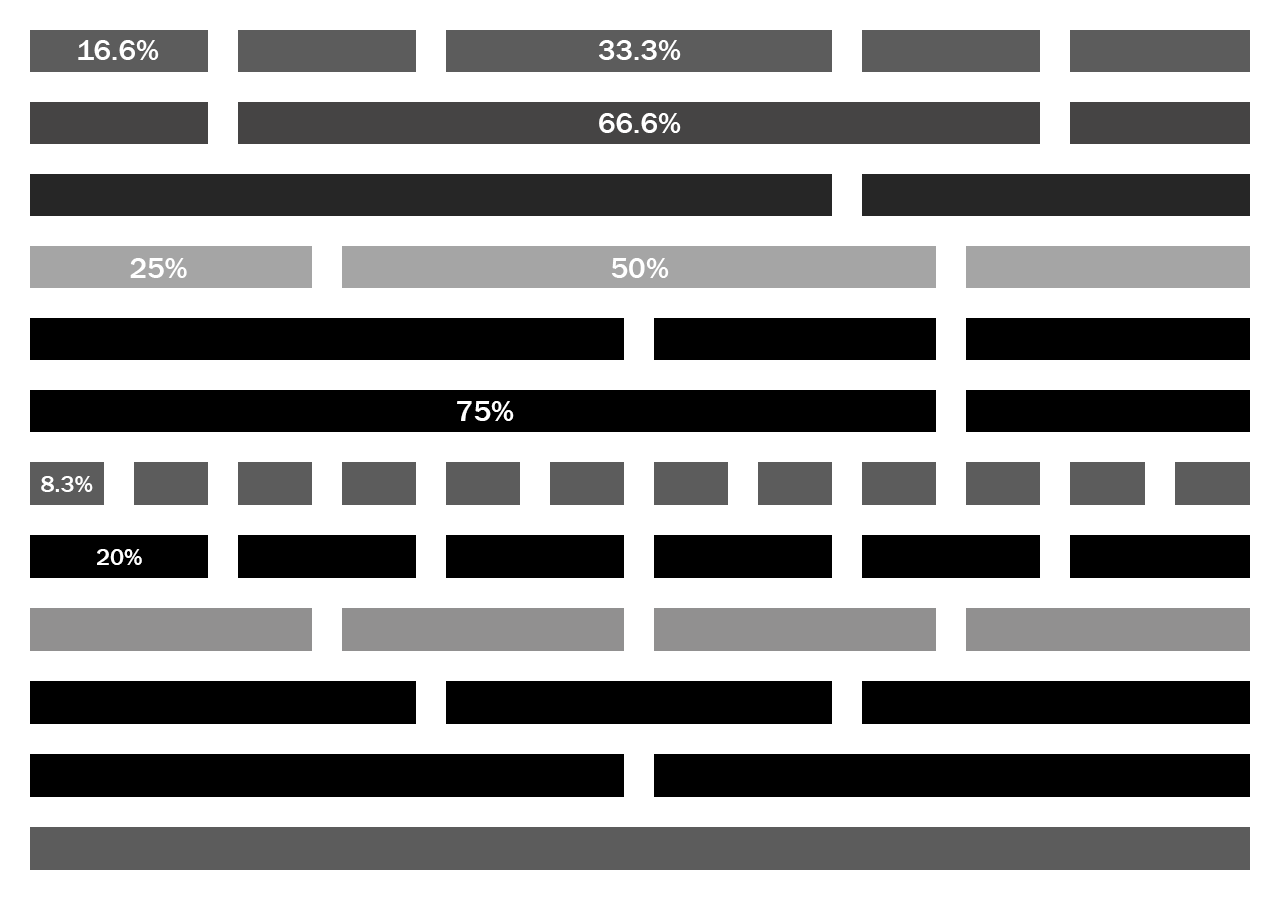
<style>
.page{position:relative;width:1280px;height:900px;background:#ffffff}
.page>*{position:absolute;margin:0}
.t1{font:30px "FranklinGothic-Medium";color:#ffffff}
.t2{font:24px "FranklinGothic-Medium";color:#ffffff}
</style>
<div class="page">
<p class="t1" style="left:78px;top:40px;width:81px;height:20px">16.6%</p>
<p class="t1" style="left:599px;top:40px;width:82px;height:20px">33.3%</p>
<p class="t1" style="left:599px;top:113px;width:82px;height:20px">66.6%</p>
<p class="t1" style="left:130px;top:258px;width:57px;height:20px">25%</p>
<p class="t1" style="left:611px;top:258px;width:58px;height:20px">50%</p>
<p class="t1" style="left:457px;top:401px;width:57px;height:20px">75%</p>
<p class="t2" style="left:41px;top:476px;width:52px;height:16px">8.3%</p>
<p class="t2" style="left:97px;top:549px;width:45px;height:16px">20%</p>
</div>
